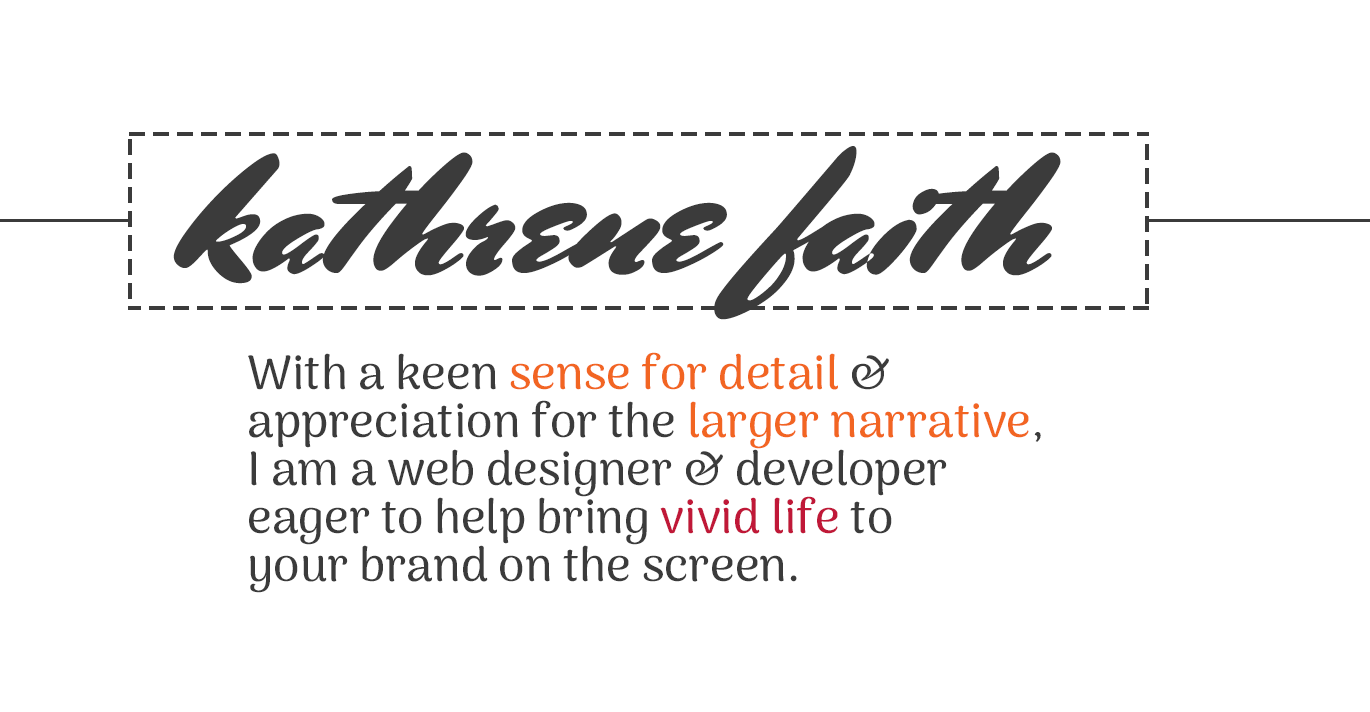
<style>
.page{position:relative;width:1370px;height:712px;background:#ffffff}
.page>*{position:absolute;margin:0}
.t1{font:175px "MrsSheppards-Regular";color:#3b3b3b}
.t2{font:48px/48px "ArimaMadurai-Medium";color:#3b3b3b}
.t3{font:48px/48px "ArimaMadurai-Medium";color:#f26522}
.t4{font:48px/48px "ArimaMadurai-Medium";color:#c01838}
</style>
<div class="page">
<p class="t1" style="left:173px;top:146px;width:888px;height:174px">kathrene faith</p>
<p class="t2" style="left:248px;top:352px;width:793px;height:241px">With a keen <span class="t3">sense for detail</span> &amp;<br>appreciation for the <span class="t3">larger narrative</span>,<br>I am a web designer &amp; developer<br>eager to help bring <span class="t4">vivid life</span> to<br>your brand on the screen.</p>
</div>
